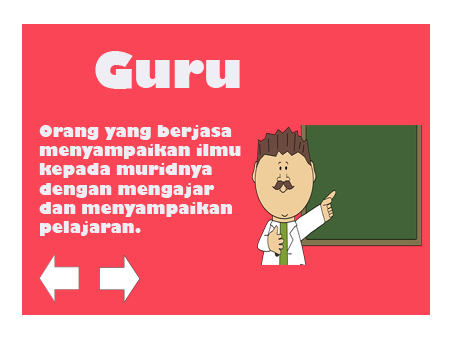
<style>
.page{position:relative;width:454px;height:340px;background:#fa4556}
.page>*{position:absolute;margin:0}
.t1{font:48px "GillSans-UltraBold";color:#f0eef5}
.t2{font:16px "GillSans-UltraBold";color:#f0eef5}
</style>
<div class="page">
<p class="t1" style="left:95px;top:51px;width:145px;height:38px">Guru</p>
<p class="t2" style="left:39px;top:125px;width:202px;height:111px">Orang yang berjasa <br>menyampaikan ilmu <br>kepada muridnya <br>dengan mengajar <br>dan menyampaikan <br>pelajaran.</p>
</div>
